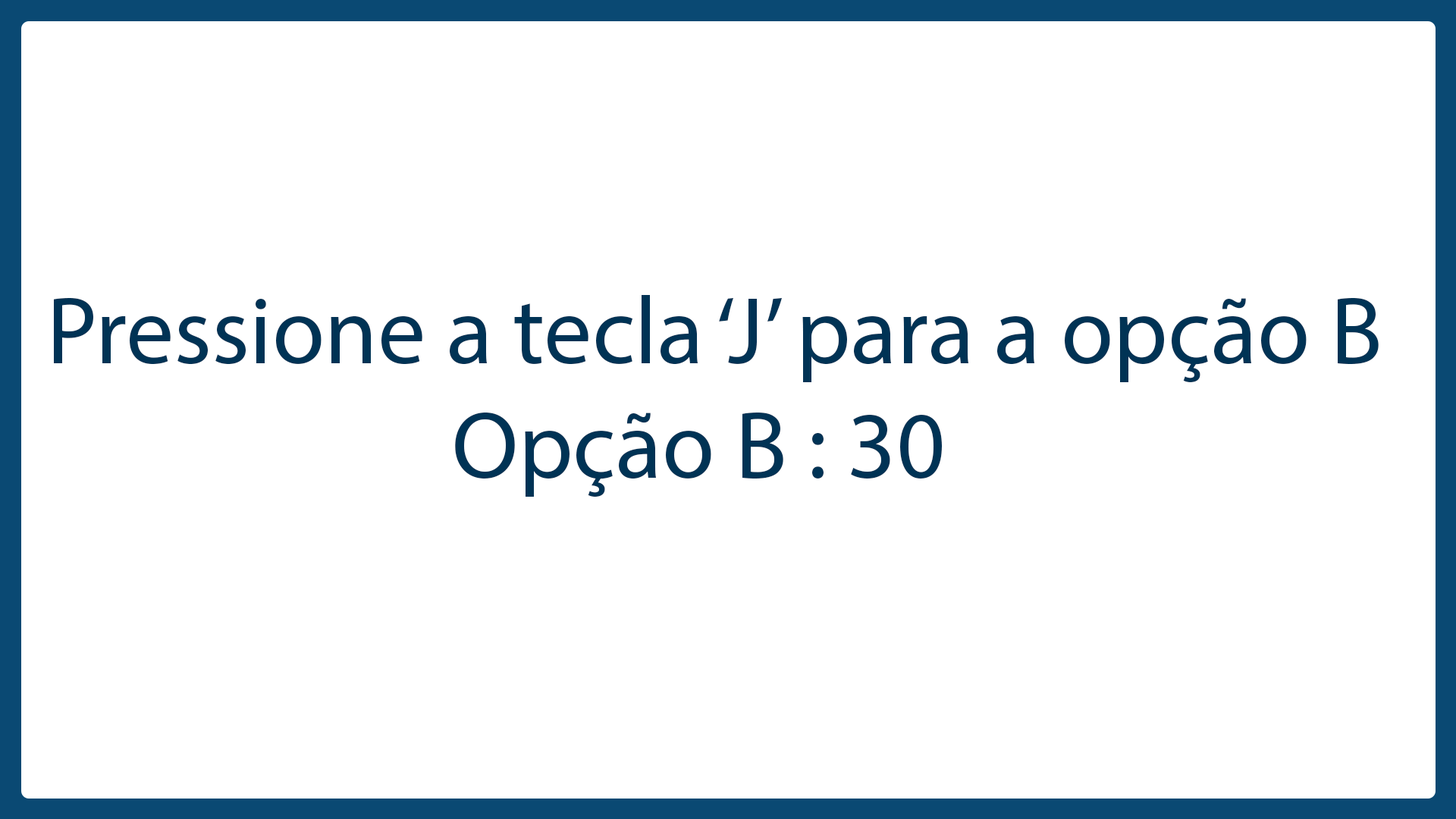
<style>
.page{position:relative;width:1456px;height:819px;background:#ffffff}
.page>*{position:absolute;margin:0}
.t1{font:95.9px "MyriadPro-Regular";color:#003355}
</style>
<div class="page">
<p class="t1" style="left:54px;top:295px;width:1325px;height:202px">Pressione a tecla ‘J’ para a opção B<br>                    Opção B : 30</p>
</div>
